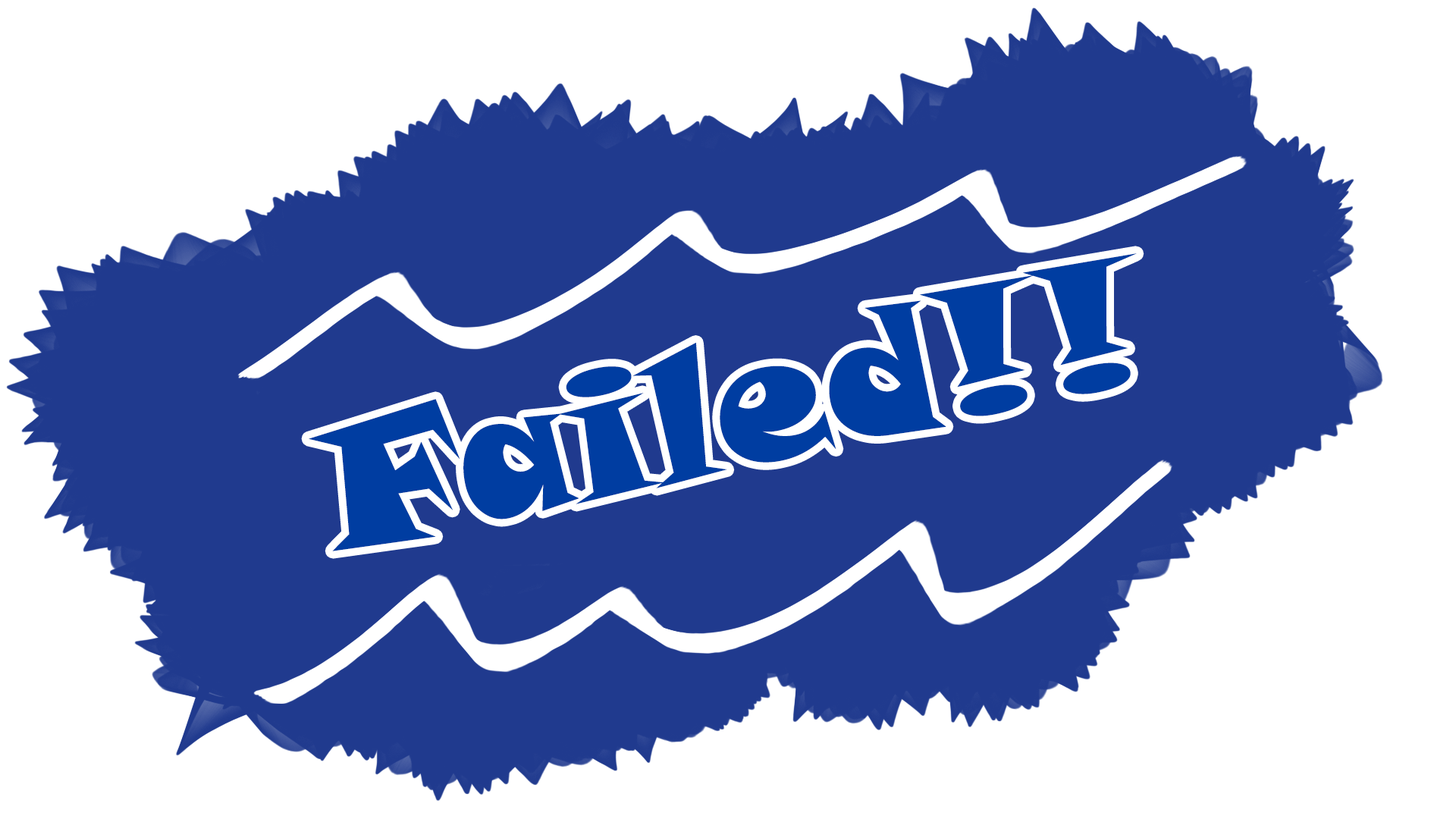
<style>
.page{position:relative;width:1456px;height:819px;background:#203a8e}
.page>*{position:absolute;margin:0}
.t1{font:178.3px "SnapITC-Regular";color:#003da1}
</style>
<div class="page">
<p class="t1" style="left:309px;top:253px;width:828px;height:298px;rotate:-12deg">Failed!!</p>
</div>
